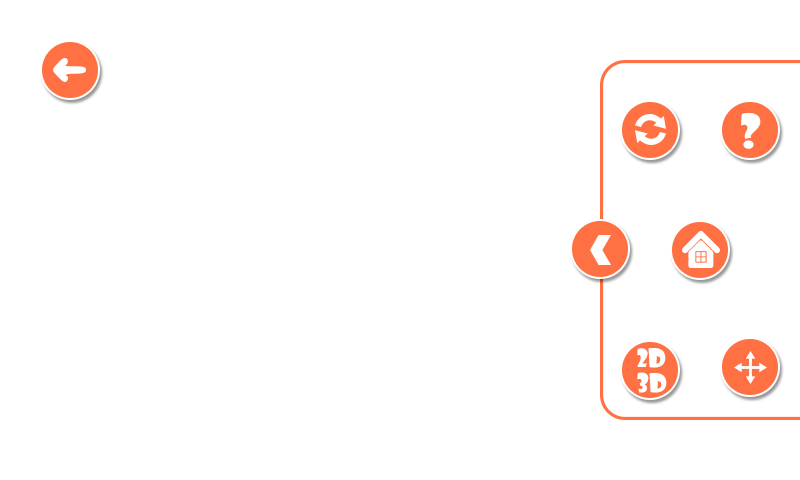
<style>
.page{position:relative;width:800px;height:480px;background:#ffffff}
.page>*{position:absolute;margin:0}
.t1{font:45.5px "ShowcardGothic-Reg";color:#ffffff}
.t2{font:25px "ShowcardGothic-Reg";color:#ffffff}
</style>
<div class="page">
<p class="t1" style="left:741px;top:113px;width:20px;height:36px">?</p>
<p class="t2" style="left:637px;top:348px;width:29px;height:20px">2d</p>
<p class="t2" style="left:637px;top:372px;width:30px;height:21px">3d</p>
</div>
